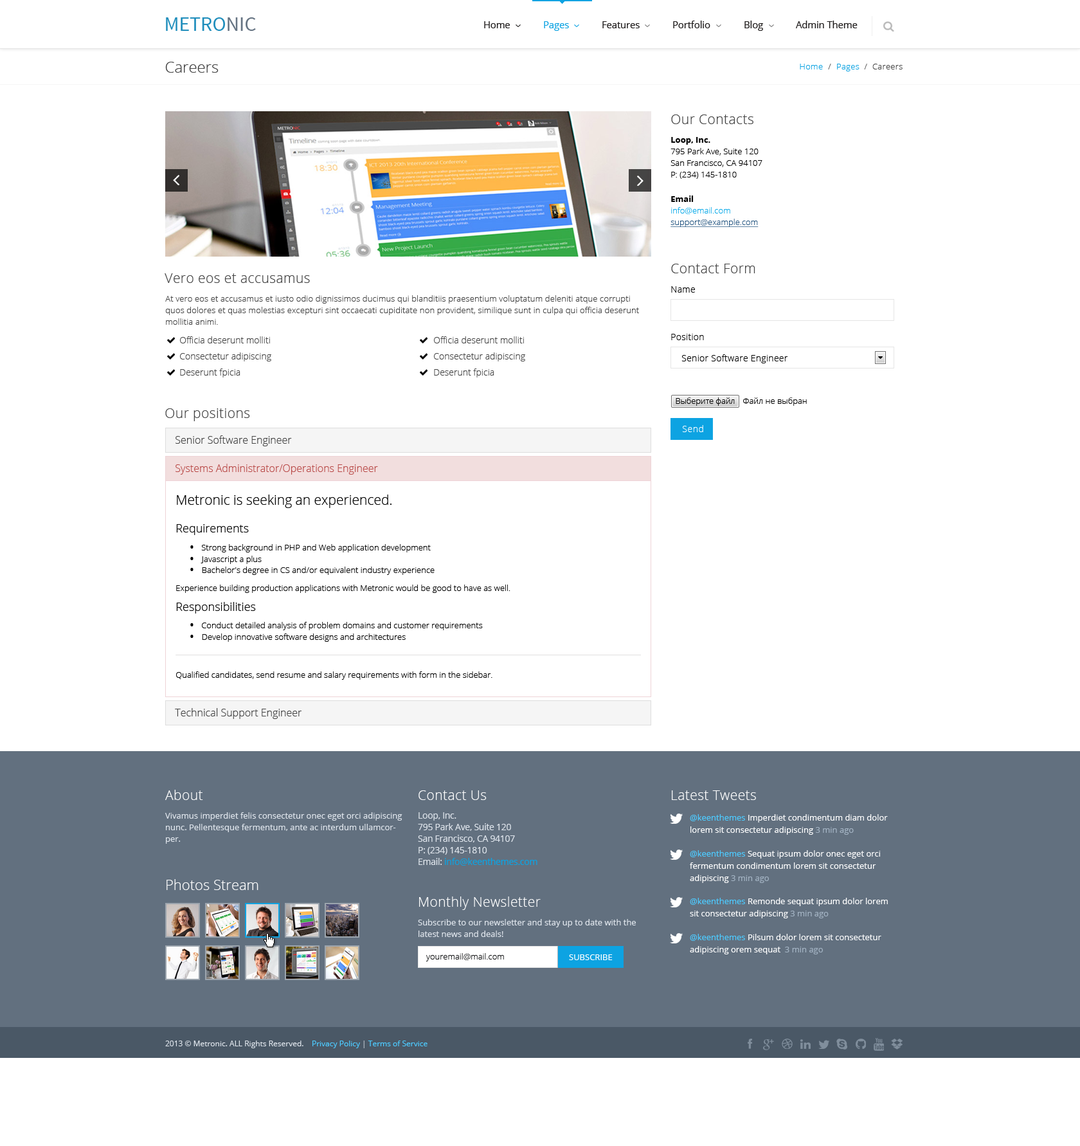
<style>
.page{position:relative;width:1080px;height:1146px;background:#ffffff}
.page>*{position:absolute;margin:0}
.t1{font:20.5px "SourceSansPro-Regular";color:#208ebc;text-transform:uppercase}
.t2{font:20.5px "SourceSansPro-Regular";color:#667483;text-transform:uppercase}
.t3{font:9.4px "OpenSans";color:#1f1c1c}
.t4{font:9.4px "OpenSans";color:#0da3e2}
.t5{font:15.4px "OpenSans-Light";color:#444444}
.t6{font:8.4px "OpenSans-Light";letter-spacing:0.025em;color:#444444}
.t7{font:8.4px "OpenSans-Light";letter-spacing:0.025em;color:#0da3e2}
.t8{font:13.5px "OpenSans-Light";letter-spacing:0.02em;color:#444444}
.t9{font:8.4px/11.6px "OpenSans-Light";color:#000000}
.t10{font:8.4px/11.6px "OpenSans-Bold";color:#000000}
.t11{font:8.4px/11.6px "OpenSans-Light";color:#265782;text-decoration:underline}
.t12{font:8.4px/11.6px "OpenSans-Light";color:#0dabe9}
.t13{font:9px "OpenSans-Light";letter-spacing:0.02em;color:#000000}
.t14{font:8.4px/11.6px "OpenSans-Light";letter-spacing:0.01em;color:#444444}
.t15{font:9px/16.1px "OpenSans-Light";color:#444444}
.t16{font:8.4px "OpenSans-Light";letter-spacing:-0.01em;color:#000000}
.t17{font:8.4px "OpenSans-Light";color:#000000}
.t18{font:9px "OpenSans-Light";letter-spacing:0.04em;color:#ffffff}
.t19{font:10.3px "OpenSans-Light";color:#444444}
.t20{font:10.3px "OpenSans-Light";color:#b94a48}
.t21{font:8.4px/7.5px "OpenSans-Light";color:#000000}
.t22{font:13.5px "OpenSans-Light";color:#000000}
.t23{font:11.6px/11.4px "OpenSans-Light";color:#000000}
.t24{font:16.7px/7.7px "OpenSans-Light";color:#000000}
.t25{font:8.4px/6.4px "OpenSans-Light";color:#000000}
.t26{font:8.4px/11.4px "OpenSans-Light";color:#000000}
.t27{font:16.7px/6.4px "OpenSans-Light";color:#000000}
.t28{font:11.6px/3.7px "OpenSans-Light";color:#000000}
.t29{font:16.7px/9px "OpenSans-Light";color:#000000}
.t30{font:8.4px/12.7px "OpenSans-Light";color:#000000}
.t31{font:13.5px "OpenSans-Light";letter-spacing:0.02em;color:#fefefe}
.t32{font:13.5px "OpenSans-Light";letter-spacing:0.02em;color:#ffffff}
.t33{font:8.4px/11.6px "OpenSans";color:#dee4eb}
.t34{font:9px/11.6px "OpenSans";letter-spacing:-0.02em;color:#dee4eb}
.t35{font:9px/11.6px "OpenSans";letter-spacing:-0.02em;color:#0da3e2}
.t36{font:8.4px/12.2px "OpenSans";color:#ffffff}
.t37{font:8.4px/12.2px "OpenSans";color:#4dcaff}
.t38{font:8.4px/12.2px "OpenSans";color:#a3b3c3}
.t39{font:14.1px "OpenSans-Light";color:#fefefe}
.t40{font:8.4px "OpenSans-Light";color:#121314}
.t41{font:8.4px "OpenSans";color:#ffffff}
.t42{font:7.7px "OpenSans";color:#dee4eb}
.t43{font:7.7px "OpenSans";color:#4dcaff}
.t44{font:7.7px "OpenSans";color:#b5bdc7}
</style>
<div class="page">
<p class="t1" style="left:166px;top:17px;width:90px;height:14px">Metro<span class="t2">nic</span></p>
<p class="t3" style="left:484px;top:21px;width:26px;height:7px">Home</p>
<p class="t4" style="left:544px;top:21px;width:25px;height:10px">Pages</p>
<p class="t3" style="left:602px;top:21px;width:38px;height:7px">Features</p>
<p class="t3" style="left:673px;top:21px;width:37px;height:7px">Portfolio</p>
<p class="t3" style="left:744px;top:21px;width:19px;height:10px">Blog</p>
<p class="t3" style="left:796px;top:21px;width:62px;height:7px">Admin Theme</p>
<p class="t5" style="left:165px;top:62px;width:54px;height:11px">Careers</p>
<p class="t6" style="left:800px;top:64px;width:103px;height:7px"><span class="t7">Home  </span>/  <span class="t7">Pages</span>  /  Careers</p>
<p class="t8" style="left:671px;top:114px;width:82px;height:10px">Our Contacts</p>
<p class="t9" style="left:670px;top:137px;width:92px;height:42px"><span class="t10">Loop, Inc.<br></span>795 Park Ave, Suite 120<br>San Francisco, CA 94107<br>P: (234) 145-1810</p>
<p class="t11" style="left:670px;top:195px;width:89px;height:32px"><span class="t10">Email<br></span><span class="t12">info@email.com<br></span>support@example.com</p>
<p class="t8" style="left:671px;top:264px;width:84px;height:9px">Contact Form</p>
<p class="t8" style="left:165px;top:273px;width:145px;height:10px">Vero eos et accusamus</p>
<p class="t13" style="left:671px;top:286px;width:24px;height:6px">Name</p>
<p class="t14" style="left:165px;top:295px;width:474px;height:30px">At vero eos et accusamus et iusto odio dignissimos ducimus qui blanditiis praesentium voluptatum deleniti atque corrupti quos dolores et quas molestias excepturi sint occaecati cupiditate non provident, similique sunt in culpa qui officia deserunt mollitia animi.</p>
<p class="t15" style="left:180px;top:336px;width:91px;height:41px">Officia deserunt molliti<br>Consectetur adipiscing<br>Deserunt fpicia</p>
<p class="t15" style="left:434px;top:336px;width:91px;height:41px">Officia deserunt molliti<br>Consectetur adipiscing<br>Deserunt fpicia</p>
<p class="t13" style="left:671px;top:334px;width:33px;height:6px">Position</p>
<p class="t13" style="left:681px;top:354px;width:107px;height:9px">Senior Software Engineer</p>
<p class="t16" style="left:676px;top:397px;width:59px;height:9px">Выберите файл</p>
<p class="t17" style="left:743px;top:397px;width:64px;height:9px">Файл не выбран</p>
<p class="t8" style="left:165px;top:408px;width:85px;height:13px">Our positions</p>
<p class="t18" style="left:682px;top:425px;width:21px;height:7px">Send</p>
<p class="t19" style="left:176px;top:435px;width:116px;height:11px">Senior Software Engineer</p>
<p class="t20" style="left:176px;top:464px;width:202px;height:10px">Systems Administrator/Operations Engineer</p>
<p class="t21" style="left:176px;top:494px;width:334px;height:148px"><span class="t22">Metronic is seeking an experienced.<br><br></span><span class="t23">Requirements<br><br>      </span><span class="t24">•  </span><span class="t25">Strong background in PHP and Web application development<br>      </span><span class="t24">•  </span><span class="t26">Javascript a plus<br>      </span><span class="t27">•  </span><span class="t26">Bachelor's degree in CS and/or equivalent industry experience<br><br></span>Experience building production applications with Metronic would be good to have as well.<br><br><span class="t28">Responsibilities<br><br>      </span><span class="t29">•  </span><span class="t30">Conduct detailed analysis of problem domains and customer requirements<br>      </span><span class="t24">•  </span><span class="t26">Develop innovative software designs and architectures</span></p>
<p class="t17" style="left:176px;top:671px;width:316px;height:9px">Qualified candidates, send resume and salary requirements with form in the sidebar.</p>
<p class="t19" style="left:175px;top:708px;width:127px;height:11px">Technical Support Engineer</p>
<p class="t31" style="left:165px;top:789px;width:38px;height:11px">About</p>
<p class="t32" style="left:419px;top:790px;width:68px;height:10px">Contact Us</p>
<p class="t32" style="left:672px;top:790px;width:84px;height:10px">Latest Tweets</p>
<p class="t33" style="left:165px;top:812px;width:237px;height:31px">Vivamus imperdiet felis consectetur onec eget orci adipiscing nunc. Pellentesque fermentum, ante ac interdum ullamcorper.</p>
<p class="t34" style="left:418px;top:812px;width:119px;height:53px">Loop, Inc. <br>795 Park Ave, Suite 120 <br>San Francisco, CA 94107 <br>P: (234) 145-1810 <br>Email: <span class="t35">info@keenthemes.com</span></p>
<p class="t36" style="left:690px;top:814px;width:198px;height:20px"><span class="t37">@keenthemes </span>Imperdiet condimentum diam dolor lorem sit consectetur adipiscing<span class="t38"> 3 min ago</span></p>
<p class="t36" style="left:690px;top:850px;width:191px;height:33px"><span class="t37">@keenthemes </span>Sequat ipsum dolor onec eget orci fermentum condimentum lorem sit consectetur adipiscing<span class="t38"> 3 min ago</span></p>
<p class="t39" style="left:166px;top:879px;width:92px;height:11px">Photos Stream</p>
<p class="t32" style="left:419px;top:896px;width:122px;height:14px">Monthly Newsletter</p>
<p class="t36" style="left:690px;top:897px;width:198px;height:21px"><span class="t37">@keenthemes </span>Remonde sequat ipsum dolor lorem sit consectetur adipiscing<span class="t38"> 3 min ago</span></p>
<p class="t33" style="left:418px;top:919px;width:218px;height:18px">Subscribe to our newsletter and stay up to date with the latest news and deals!</p>
<p class="t36" style="left:690px;top:933px;width:191px;height:21px"><span class="t37">@keenthemes </span>Pilsum dolor lorem sit consectetur adipiscing orem sequat <span class="t38"> 3 min ago</span></p>
<p class="t40" style="left:426px;top:953px;width:78px;height:8px">youremail@mail.com</p>
<p class="t41" style="left:569px;top:954px;width:44px;height:6px">SUBSCRIBE</p>
<p class="t42" style="left:165px;top:1040px;width:263px;height:8px">2013 © Metronic. ALL Rights Reserved.    <span class="t43">Privacy Policy </span><span class="t44">|</span><span class="t43"> Terms of Service</span></p>
</div>
